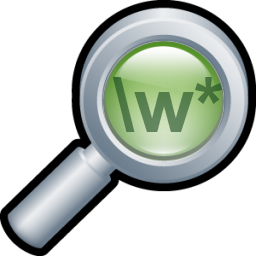
<style>
.page{position:relative;width:256px;height:256px;background:#ffffff}
.page>*{position:absolute;margin:0}
.t1{font:76.6px "Arial-BoldMT";color:#577f4f}
</style>
<div class="page">
<p class="t1" style="left:113px;top:67px;width:111px;height:94px">\w*</p>
</div>
